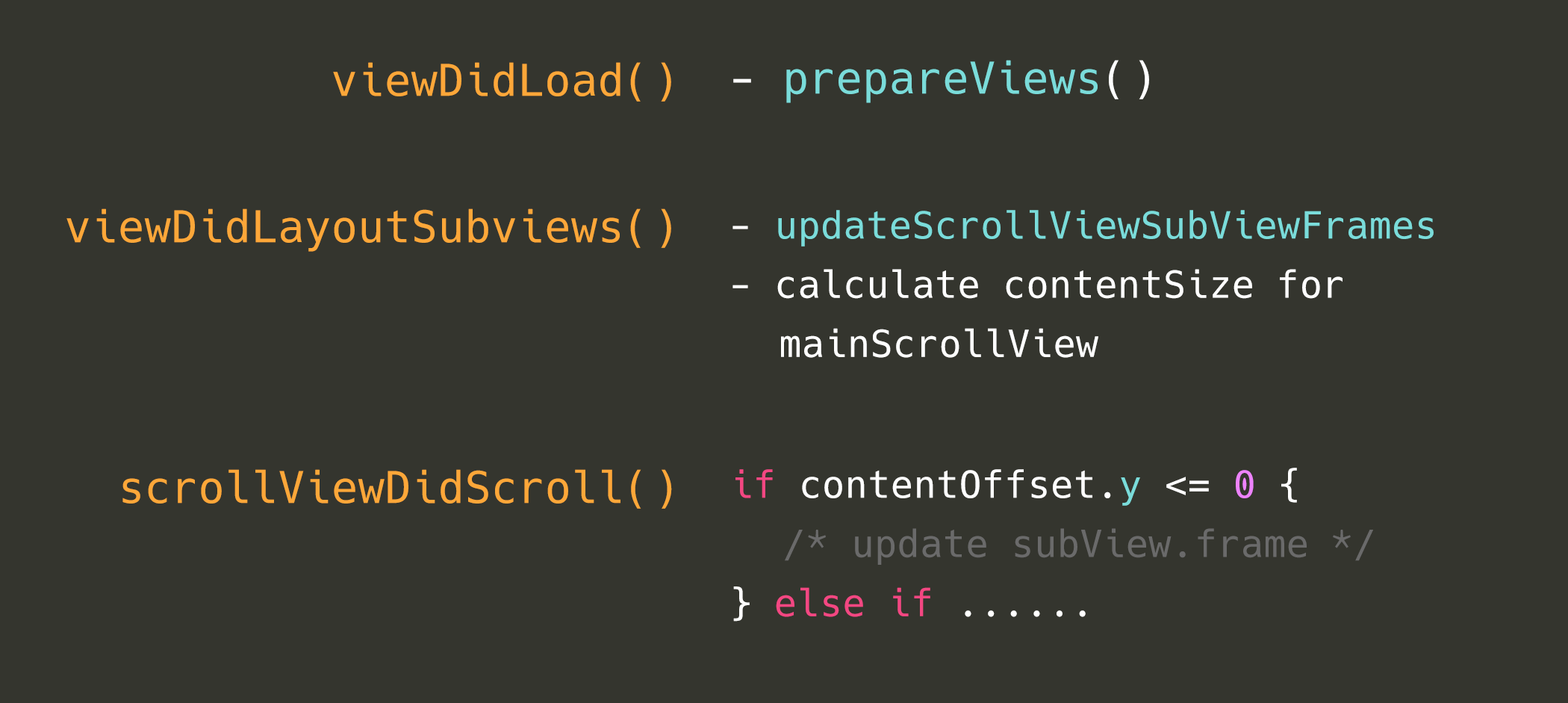
<style>
.page{position:relative;width:1568px;height:703px;background:#34352e}
.page>*{position:absolute;margin:0}
.t1{font:43.6px "Hack";letter-spacing:0.01em;color:#fda739}
.t2{font:43.6px "Hack";letter-spacing:0.01em;color:#7adcda}
.t3{font:43.6px "Hack";letter-spacing:0.01em;color:#ffffff}
.t4{font:37.3px/59.1px "Hack";letter-spacing:0.01em;color:#ffffff}
.t5{font:37.3px/59.1px "Hack";letter-spacing:0.01em;color:#7adcda}
.t6{font:37.3px/59.1px "Hack";letter-spacing:0.01em;color:#6a6a6a}
.t7{font:37.3px/59.1px "Hack";letter-spacing:0.01em;color:#f34782}
.t8{font:37.3px/59.1px "Hack";letter-spacing:0.01em;color:#ed83fc}
</style>
<div class="page">
<p class="t1" style="left:333px;top:62px;width:338px;height:40px">viewDidLoad()</p>
<p class="t2" style="left:733px;top:60px;width:416px;height:43px"><span class="t3">- </span>prepareViews<span class="t3">()</span></p>
<p class="t1" style="left:66px;top:208px;width:605px;height:44px">viewDidLayoutSubviews()</p>
<p class="t4" style="left:732px;top:210px;width:702px;height:148px">- <span class="t5">updateScrollViewSubViewFrames<br></span>- calculate contentSize for <br>  mainScrollView</p>
<p class="t1" style="left:122px;top:469px;width:550px;height:39px">scrollViewDidScroll()</p>
<p class="t6" style="left:733px;top:467px;width:640px;height:154px"><span class="t7">if </span><span class="t4">contentOffset.</span><span class="t5">y</span><span class="t4"> &lt;= </span><span class="t8">0</span><span class="t4"> { <br>  </span>/* update subView.frame */<br><span class="t4">} </span><span class="t7">else if</span><span class="t4"> ......</span></p>
</div>
